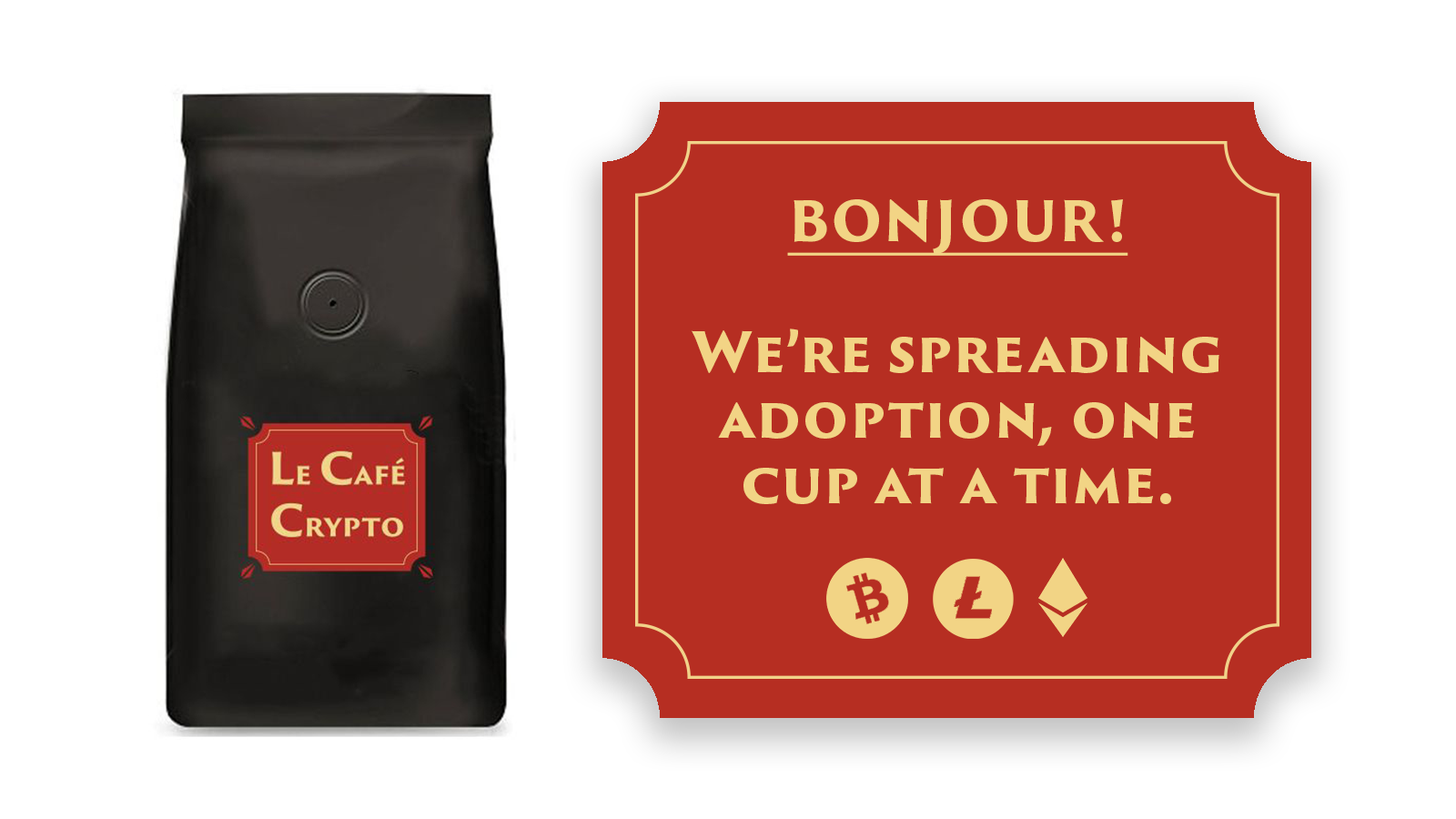
<style>
.page{position:relative;width:1456px;height:819px;background:#ffffff}
.page>*{position:absolute;margin:0}
.t1{font:54.6px "TrajanSansPro-Black";letter-spacing:0.02em;color:#f2d485}
.t2{font:54.6px "TrajanSansPro-Black";letter-spacing:0.02em;color:#f2d485;text-transform:uppercase;text-decoration:underline}
</style>
<div class="page">
<p class="t1" style="left:692px;top:199px;width:527px;height:305px;text-align:center"><span class="t2">Bonjour!<br><br></span>We’re spreading adoption, one cup at a time.</p>
</div>
